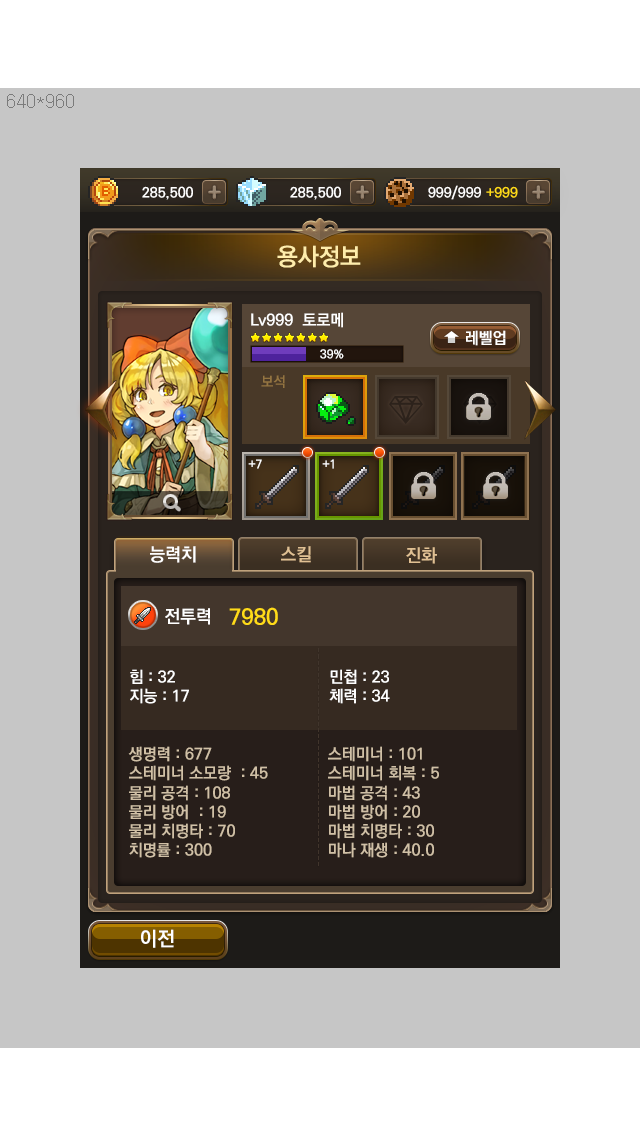
<style>
.page{position:relative;width:640px;height:1136px;background:#c6c6c6}
.page>*{position:absolute;margin:0}
.t1{font:24px "KoPubDotumBold";color:#ffedab}
.t2{font:16px "KoPubDotumBold";color:#ffffff}
.t3{font:12px "KoPubDotumBold";color:#ffffff}
.t4{font:14.1px "KoPubDotumBold";color:#937441}
.t5{font:18px "KoPubDotumBold";color:#ffffff}
.t6{font:18px "KoPubDotumBold";color:#e0c093}
.t7{font:22px "KoPubDotumBold";color:#ffdb18}
.t8{font:16px "KoPubDotumBold";color:#d0c0a6}
.t9{font:20px "KoPubDotumBold";color:#ffffff}
</style>
<div class="page">
<p class="t1" style="left:277px;top:245px;width:84px;height:23px">용사정보</p>
<p class="t2" style="left:251px;top:312px;width:92px;height:16px">Lv999  토로메</p>
<p class="t2" style="left:466px;top:330px;width:40px;height:16px">레벨업</p>
<p class="t3" style="left:320px;top:349px;width:24px;height:10px">39%</p>
<p class="t4" style="left:261px;top:375px;width:24px;height:13px">보석</p>
<p class="t3" style="left:248px;top:459px;width:14px;height:10px">+7</p>
<p class="t3" style="left:322px;top:459px;width:12px;height:10px">+1</p>
<p class="t5" style="left:150px;top:546px;width:46px;height:17px">능력치</p>
<p class="t6" style="left:281px;top:546px;width:30px;height:17px">스킬</p>
<p class="t6" style="left:406px;top:547px;width:31px;height:17px">진화</p>
<p class="t5" style="left:165px;top:608px;width:45px;height:17px">전투력</p>
<p class="t7" style="left:229px;top:607px;width:49px;height:18px">7980</p>
<p class="t2" style="left:130px;top:669px;width:59px;height:35px">힘 : 32<br>지능 : 17</p>
<p class="t2" style="left:329px;top:669px;width:61px;height:35px">민첩 : 23<br>체력 : 34</p>
<p class="t8" style="left:128px;top:746px;width:140px;height:112px">생명력 : 677<br>스테미너 소모량  : 45<br>물리 공격 : 108<br>물리 방어  : 19<br>물리 치명타 : 70<br>치명률 : 300</p>
<p class="t8" style="left:328px;top:746px;width:111px;height:112px">스테미너 : 101<br>스테미너 회복 : 5<br>마법 공격 : 43<br>마법 방어 : 20<br>마법 치명타 : 30<br>마나 재생 : 40.0</p>
<p class="t9" style="left:141px;top:929px;width:33px;height:19px">이전</p>
</div>
